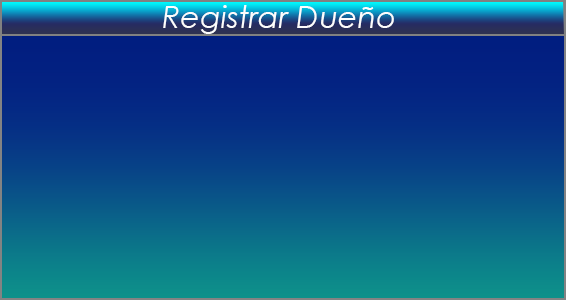
<style>
.page{position:relative;width:566px;height:300px}
.page>*{position:absolute;margin:0}
.t1{font:12px "CenturyGothic-Italic";color:#fdfdfd}
</style>
<div class="page">
<p class="t1" style="left:163px;top:5px;width:231px;height:29px">Registrar Dueño</p>
</div>
